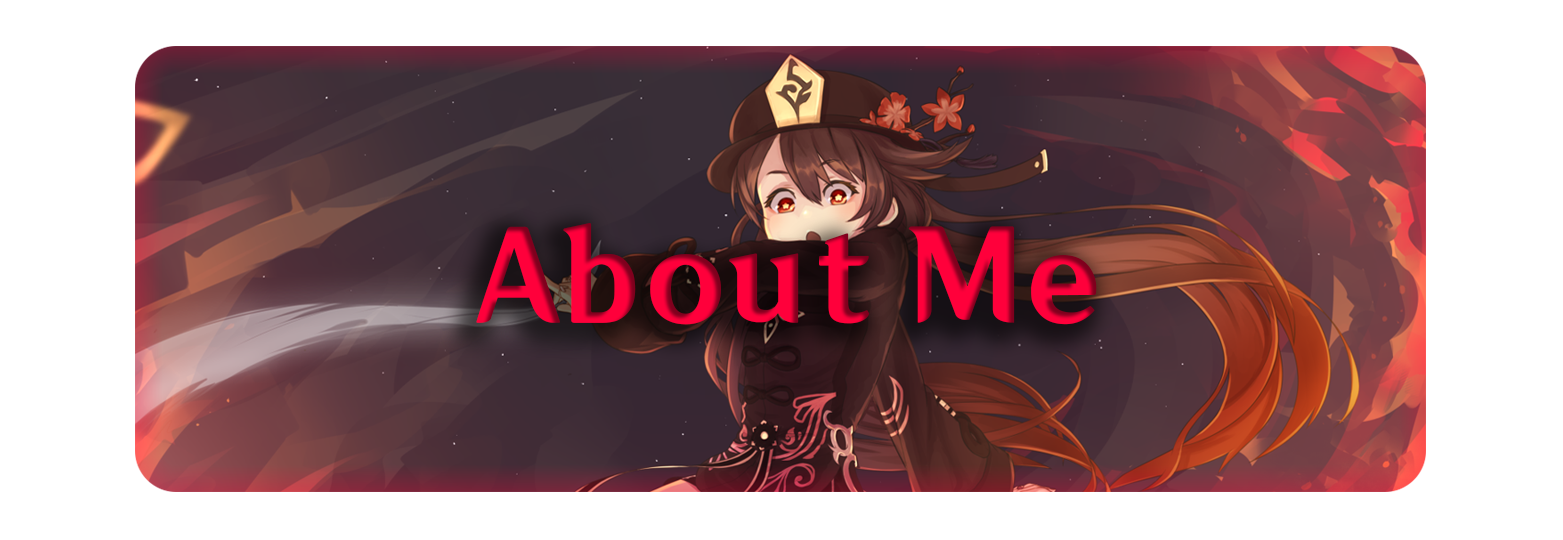
<style>
.page{position:relative;width:1563px;height:540px;background:#ffffff}
.page>*{position:absolute;margin:0}
.t1{font:121.4px "Default_SC-85W";color:#ff003b}
</style>
<div class="page">
<p class="t1" style="left:476px;top:223px;width:621px;height:102px">About Me</p>
</div>
